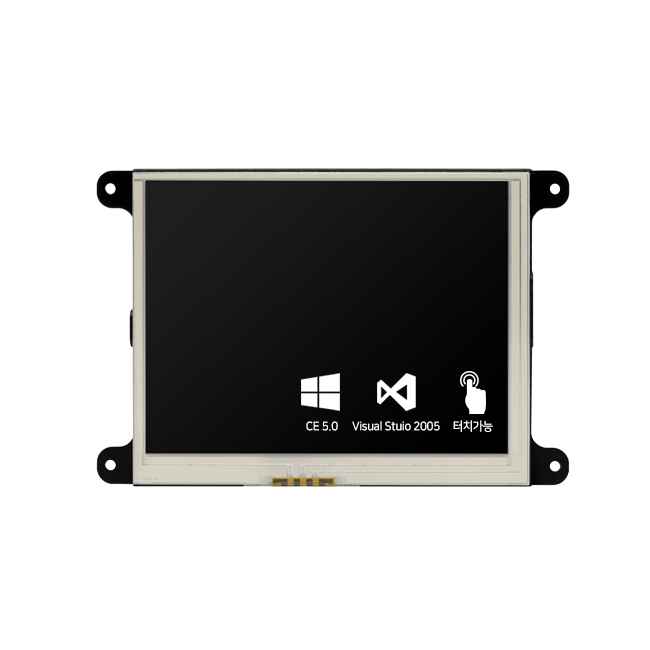
<style>
.page{position:relative;width:650px;height:650px;background:#ffffff}
.page>*{position:absolute;margin:0}
.t1{font:12px "NanumSquareB";letter-spacing:-0.03em;color:#ffffff;scale:0.95 1}
</style>
<div class="page">
<p class="t1" style="left:306px;top:421px;width:32px;height:10px">CE 5.0</p>
<p class="t1" style="left:352px;top:421px;width:88px;height:10px">Visual Stuio 2005</p>
<p class="t1" style="left:453px;top:420px;width:40px;height:12px">터치가능</p>
</div>
